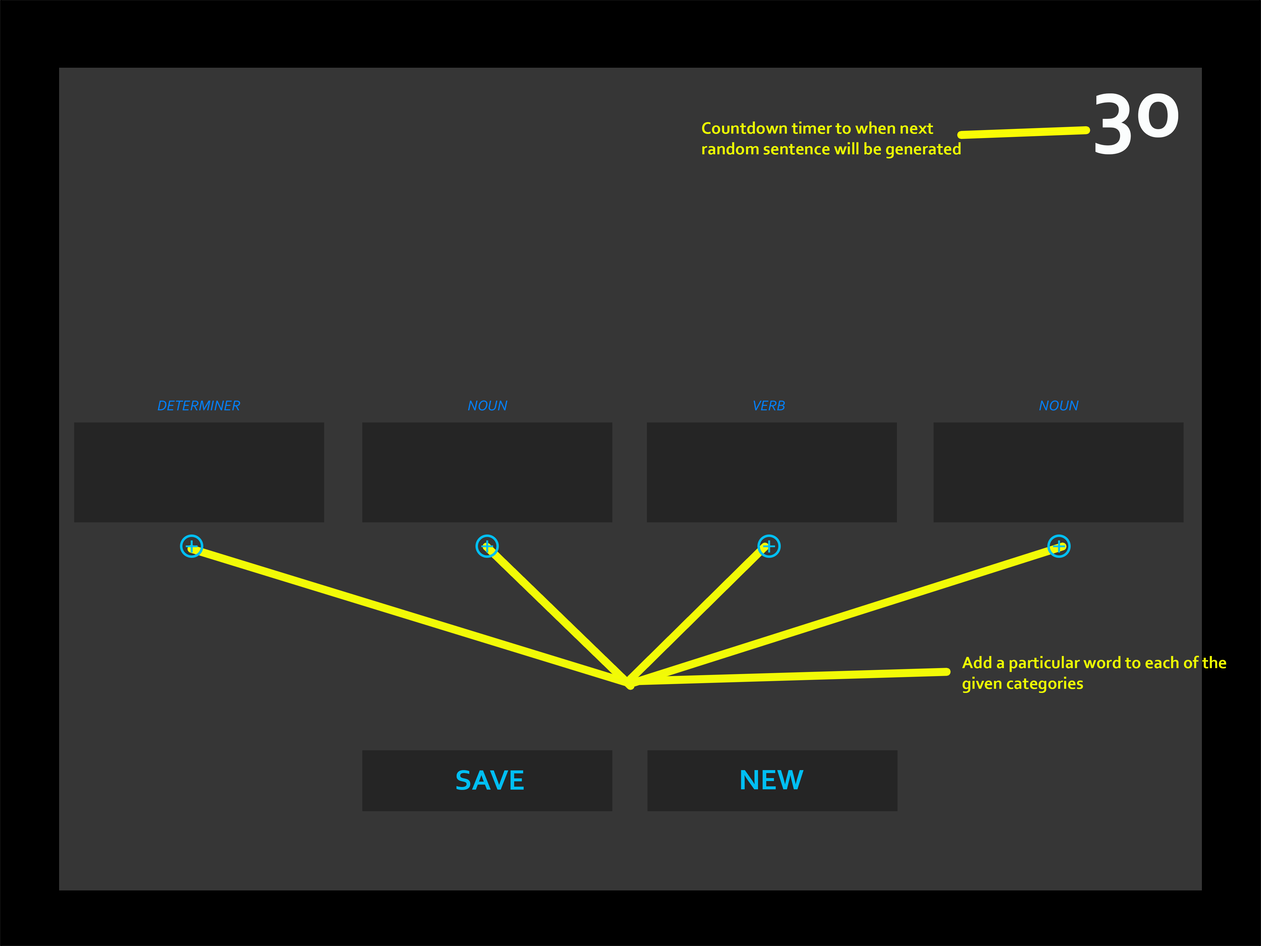
<style>
.page{position:relative;width:1261px;height:946px;background:#363636}
.page>*{position:absolute;margin:0}
.t1{font:88.7px "Corbel-Bold";color:#fbfdfd}
.t2{font:17.2px "Corbel-Bold";color:#ecfb01}
.t3{font:14.8px "Corbel-Italic";color:#0281f7}
.t4{font:29.6px "Corbel-Bold";color:#00bff3}
</style>
<div class="page">
<p class="t1" style="left:1095px;top:93px;width:83px;height:61px">30</p>
<p class="t2" style="left:702px;top:121px;width:259px;height:37px">Countdown timer to when next random sentence will be generated</p>
<p class="t3" style="left:158px;top:400px;width:82px;height:10px">DETERMINER</p>
<p class="t3" style="left:468px;top:400px;width:39px;height:10px">NOUN</p>
<p class="t3" style="left:754px;top:400px;width:31px;height:10px">VERB</p>
<p class="t3" style="left:1039px;top:400px;width:40px;height:10px">NOUN</p>
<p class="t2" style="left:962px;top:655px;width:264px;height:38px">Add a particular word to each of the given categories</p>
<p class="t4" style="left:456px;top:770px;width:68px;height:20px">SAVE</p>
<p class="t4" style="left:741px;top:770px;width:63px;height:19px">NEW</p>
</div>
